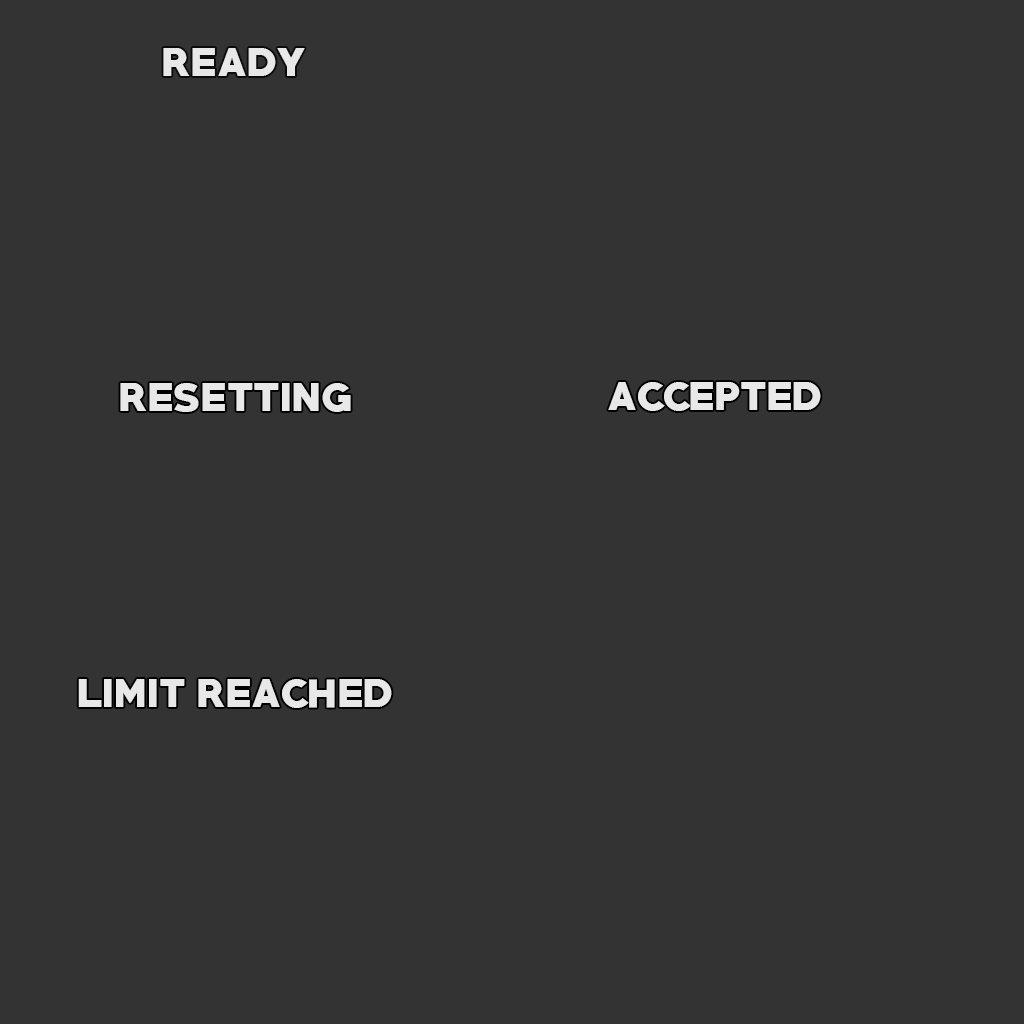
<style>
.page{position:relative;width:1024px;height:1024px;background:#333333}
.page>*{position:absolute;margin:0}
.t1{font:36px "PRIMETIME-Regular";color:#e8e8e8}
</style>
<div class="page">
<p class="t1" style="left:163px;top:48px;width:142px;height:28px">READY</p>
<p class="t1" style="left:120px;top:383px;width:231px;height:29px">RESETTING</p>
<p class="t1" style="left:608px;top:382px;width:213px;height:29px">ACCEPTED</p>
<p class="t1" style="left:78px;top:679px;width:314px;height:29px">LIMIT REACHED</p>
</div>
